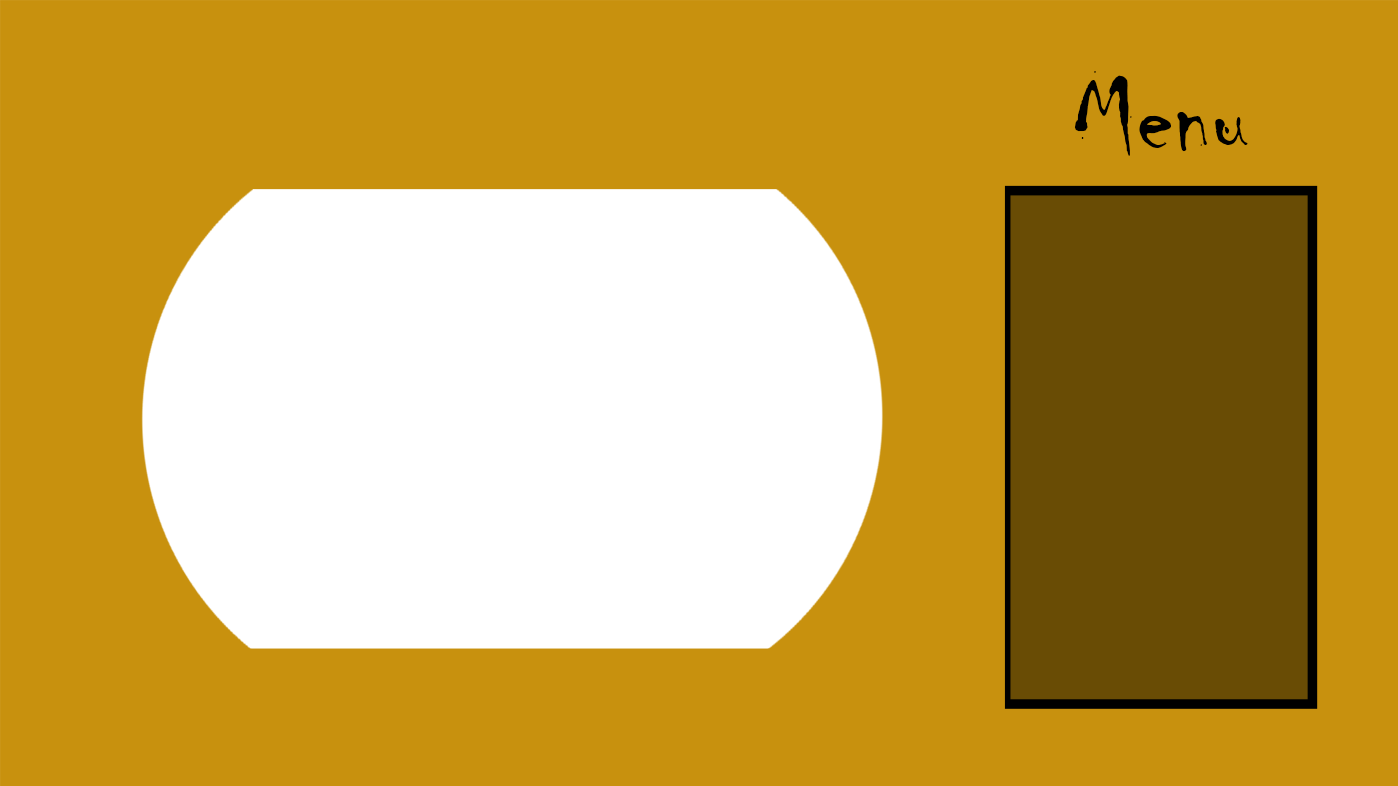
<style>
.page{position:relative;width:1398px;height:786px;background:#c8910e}
.page>*{position:absolute;margin:0}
.t1{font:109.6px "Chiller-Regular";color:#000000}
</style>
<div class="page">
<p class="t1" style="left:1074px;top:71px;width:174px;height:85px">Menu</p>
</div>
